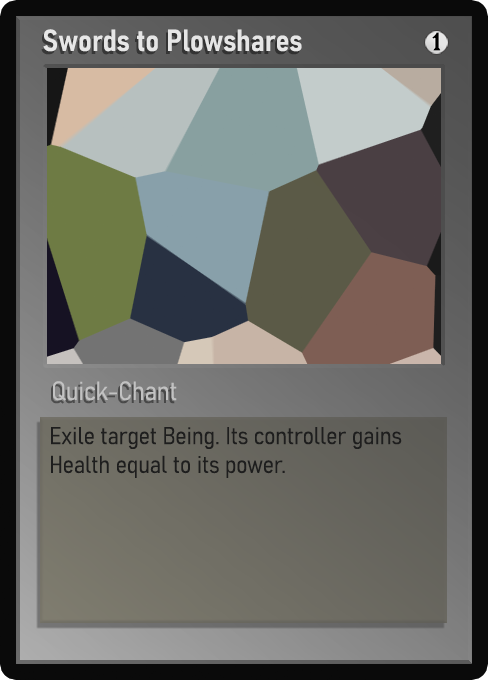
<style>
.page{position:relative;width:488px;height:680px}
.page>*{position:absolute;margin:0}
.t1{font:30px "Bahnschrift-SemiBoldSemiCondensed";color:#f2f2f2;font-weight:bold}
.t2{font:25px "WTRRoycroft";color:#000000;font-weight:bold;scale:1.09 1}
.t3{font:26px "Bahnschrift-LightSemiCondensed";color:#c8c8c8;font-weight:bold}
.t4{font:24px "Bahnschrift-LightSemiCondensed";color:#1e1e1e;font-weight:bold}
</style>
<div class="page">
<p class="t1" style="left:43px;top:29px;width:259px;height:23px;opacity:0.9">Swords to Plowshares</p>
<p class="t2" style="left:432px;top:32px;width:9px;height:19px">1</p>
<p class="t3" style="left:53px;top:381px;width:124px;height:20px;opacity:0.9">Quick-Chant</p>
<p class="t4" style="left:51px;top:427px;width:351px;height:51px">Exile target Being. Its controller gains Health equal to its power.</p>
</div>
